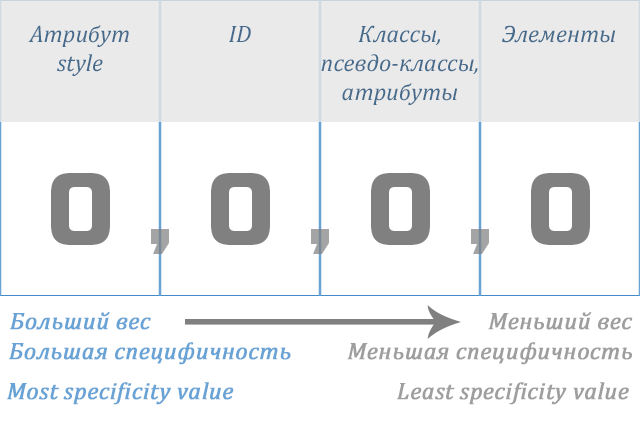
<style>
.page{position:relative;width:640px;height:422px;background:#ffffff}
.page>*{position:absolute;margin:0}
.t1{font:24px "Cambria-Italic";color:#456a8b}
.t2{font:100px "RussoOne-Regular";color:#808080}
.t3{font:100px "RussoOne-Regular";color:#a4a4a4}
.t4{font:24px "Cambria-Italic";color:#69a3d5;font-weight:bold}
.t5{font:24px "Cambria-Italic";color:#9e9e9e;font-weight:bold}
</style>
<div class="page">
<p class="t1" style="left:28px;top:25px;width:101px;height:51px;text-align:center">Атрибут<br>style</p>
<p class="t1" style="left:229px;top:26px;width:22px;height:16px">ID</p>
<p class="t1" style="left:321px;top:25px;width:157px;height:80px;text-align:center">Классы,<br>псевдо-классы,<br>атрибуты</p>
<p class="t1" style="left:502px;top:25px;width:114px;height:18px">Элементы</p>
<p class="t2" style="left:51px;top:173px;width:59px;height:72px">0</p>
<p class="t2" style="left:211px;top:173px;width:59px;height:72px">0</p>
<p class="t2" style="left:371px;top:173px;width:59px;height:72px">0</p>
<p class="t2" style="left:531px;top:173px;width:59px;height:72px">0</p>
<p class="t3" style="left:151px;top:229px;width:18px;height:25px">,</p>
<p class="t3" style="left:311px;top:229px;width:18px;height:25px">,</p>
<p class="t3" style="left:471px;top:229px;width:18px;height:25px">,</p>
<p class="t4" style="left:10px;top:312px;width:141px;height:18px">Больший вес</p>
<p class="t5" style="left:488px;top:312px;width:145px;height:18px">Меньший вес</p>
<p class="t4" style="left:9px;top:342px;width:282px;height:23px">Большая специфичность</p>
<p class="t5" style="left:347px;top:342px;width:285px;height:23px">Меньшая специфичность</p>
<p class="t4" style="left:7px;top:382px;width:227px;height:23px">Most specificity value</p>
<p class="t5" style="left:397px;top:382px;width:232px;height:23px">Least specificity value</p>
</div>
